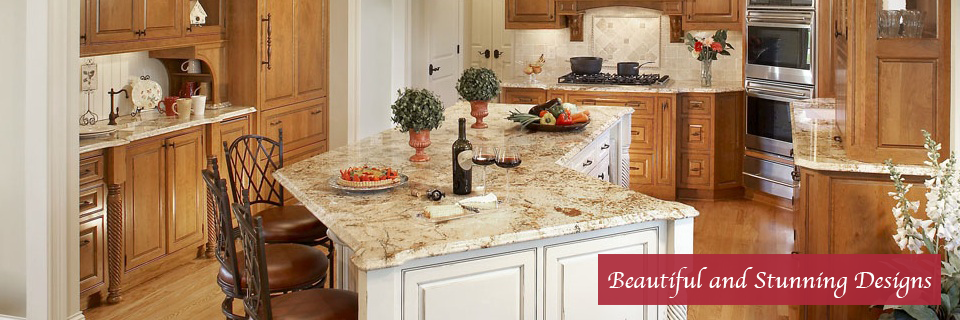
<style>
.page{position:relative;width:960px;height:320px}
.page>*{position:absolute;margin:0}
.t1{font:24px "Apple-Chancery";color:#ffffff}
</style>
<div class="page">
<p class="t1" style="left:608px;top:267px;width:324px;height:31px">Beautiful and Stunning Designs</p>
</div>
